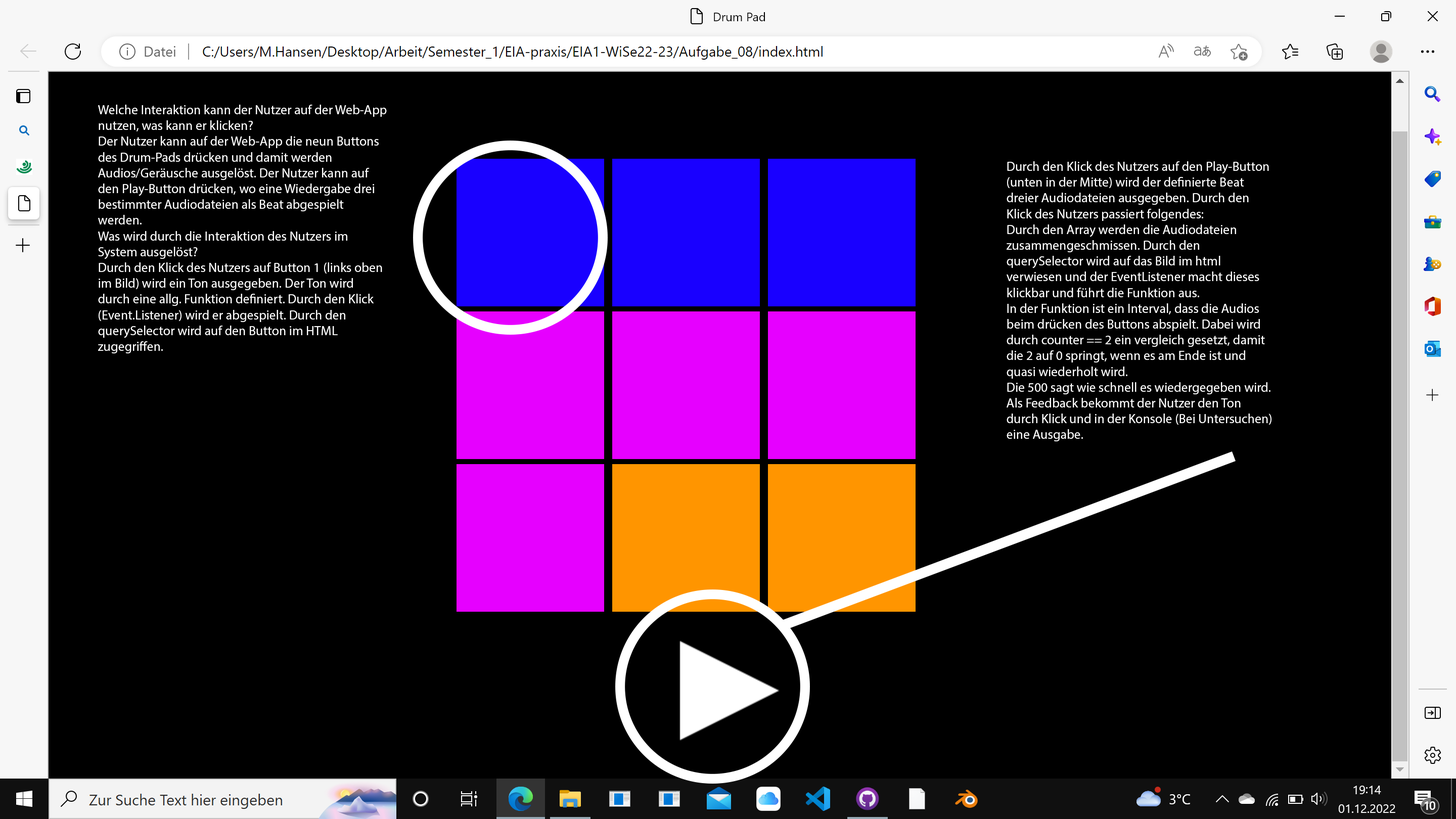
<style>
.page{position:relative;width:1456px;height:819px;background:#000000}
.page>*{position:absolute;margin:0}
.t1{font:13.1px "MyriadPro-Regular";color:#ffffff}
</style>
<div class="page">
<p class="t1" style="left:98px;top:105px;width:289px;height:248px">Welche Interaktion kann der Nutzer auf der Web-App nutzen, was kann er klicken?<br>Der Nutzer kann auf der Web-App die neun Buttons des Drum-Pads drücken und damit werden Audios/Geräusche ausgelöst. Der Nutzer kann auf den Play-Button drücken, wo eine Wiedergabe drei bestimmter Audiodateien als Beat abgespielt werden. <br>Was wird durch die Interaktion des Nutzers im System ausgelöst?<br>Durch den Klick des Nutzers auf Button 1 (links oben im Bild) wird ein Ton ausgegeben. Der Ton wird durch eine allg. Funktion definiert. Durch den Klick (Event.Listener) wird er abgespielt. Durch den querySelector wird auf den Button im HTML zugegriffen.</p>
<p class="t1" style="left:1007px;top:161px;width:264px;height:280px">Durch den Klick des Nutzers auf den Play-Button (unten in der Mitte) wird der definierte Beat dreier Audiodateien ausgegeben. Durch den Klick des Nutzers passiert folgendes:<br>Durch den Array werden die Audiodateien zusammengeschmissen. Durch den querySelector wird auf das Bild im html verwiesen und der EventListener macht dieses klickbar und führt die Funktion aus. <br>In der Funktion ist ein Interval, dass die Audios beim drücken des Buttons abspielt. Dabei wird durch counter == 2 ein vergleich gesetzt, damit die 2 auf 0 springt, wenn es am Ende ist und quasi wiederholt wird. <br>Die 500 sagt wie schnell es wiedergegeben wird. <br>Als Feedback bekommt der Nutzer den Ton durch Klick und in der Konsole (Bei Untersuchen) eine Ausgabe.</p>
</div>
